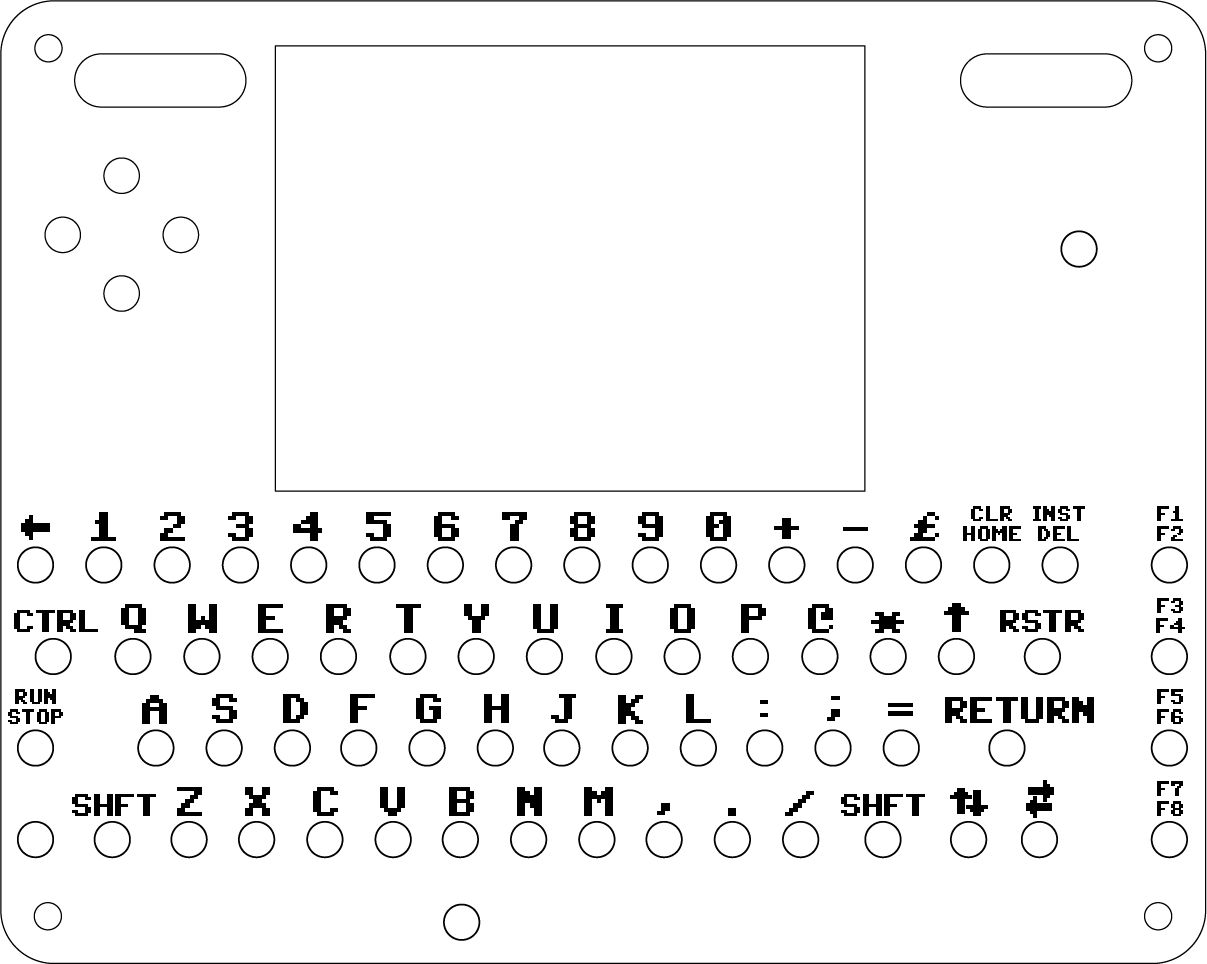
<style>
.page{position:relative;width:1207px;height:964px;background:#ffffff}
.page>*{position:absolute;margin:0}
.t1{font:16.7px "C64Pro";color:#000000}
.t2{font:33.3px "C64Pro";color:#000000}
.t3{font:25px "C64Pro";color:#000000}
.t4{font:29.2px "C64Pro";color:#000000}
</style>
<div class="page">
<p class="t1" style="left:963px;top:506px;width:58px;height:35px;text-align:center">CLR<br>HOME</p>
<p class="t1" style="left:1033px;top:506px;width:52px;height:35px;text-align:center">INST<br>DEL</p>
<p class="t1" style="left:1157px;top:506px;width:26px;height:35px;text-align:center">F1<br>F2</p>
<p class="t2" style="left:21px;top:515px;width:29px;height:25px;rotate:-90deg">↑</p>
<p class="t2" style="left:91px;top:512px;width:25px;height:29px">1</p>
<p class="t2" style="left:160px;top:512px;width:25px;height:29px">2</p>
<p class="t2" style="left:228px;top:512px;width:25px;height:29px">3</p>
<p class="t2" style="left:293px;top:512px;width:29px;height:29px">4</p>
<p class="t2" style="left:366px;top:512px;width:25px;height:29px">5</p>
<p class="t2" style="left:434px;top:512px;width:25px;height:29px">6</p>
<p class="t2" style="left:502px;top:512px;width:25px;height:29px">7</p>
<p class="t2" style="left:570px;top:512px;width:25px;height:29px">8</p>
<p class="t2" style="left:638px;top:512px;width:25px;height:29px">9</p>
<p class="t2" style="left:706px;top:512px;width:25px;height:29px">0</p>
<p class="t2" style="left:774px;top:518px;width:25px;height:21px">+</p>
<p class="t2" style="left:910px;top:512px;width:29px;height:29px">£</p>
<p class="t2" style="left:121px;top:604px;width:25px;height:29px">Q</p>
<p class="t2" style="left:188px;top:604px;width:29px;height:29px">W</p>
<p class="t2" style="left:258px;top:604px;width:25px;height:29px">E</p>
<p class="t2" style="left:326px;top:604px;width:25px;height:29px">R</p>
<p class="t2" style="left:396px;top:604px;width:25px;height:29px">T</p>
<p class="t2" style="left:464px;top:604px;width:25px;height:29px">Y</p>
<p class="t2" style="left:533px;top:604px;width:25px;height:29px">U</p>
<p class="t2" style="left:606px;top:604px;width:17px;height:29px">I</p>
<p class="t2" style="left:670px;top:604px;width:25px;height:29px">O</p>
<p class="t2" style="left:741px;top:604px;width:25px;height:29px">P</p>
<p class="t2" style="left:808px;top:604px;width:25px;height:29px">@</p>
<p class="t2" style="left:944px;top:603px;width:25px;height:29px">↑</p>
<p class="t1" style="left:1156px;top:598px;width:29px;height:35px;text-align:center">F3<br>F4</p>
<p class="t3" style="left:14px;top:610px;width:84px;height:22px">CTRL</p>
<p class="t2" style="left:871px;top:612px;width:33px;height:21px">*</p>
<p class="t3" style="left:1000px;top:610px;width:84px;height:22px">RSTR</p>
<p class="t1" style="left:8px;top:689px;width:55px;height:35px;text-align:center">RUN<br>STOP</p>
<p class="t1" style="left:1157px;top:689px;width:26px;height:35px;text-align:center">F5<br>F6</p>
<p class="t2" style="left:142px;top:695px;width:25px;height:29px">A</p>
<p class="t2" style="left:212px;top:694px;width:25px;height:29px">S</p>
<p class="t2" style="left:283px;top:694px;width:25px;height:29px">D</p>
<p class="t2" style="left:350px;top:694px;width:25px;height:29px">F</p>
<p class="t2" style="left:416px;top:694px;width:25px;height:29px">G</p>
<p class="t2" style="left:484px;top:694px;width:25px;height:29px">H</p>
<p class="t2" style="left:551px;top:694px;width:25px;height:29px">J</p>
<p class="t2" style="left:618px;top:695px;width:25px;height:29px">K</p>
<p class="t2" style="left:686px;top:694px;width:25px;height:29px">L</p>
<p class="t2" style="left:760px;top:700px;width:8px;height:17px">:</p>
<p class="t2" style="left:827px;top:696px;width:13px;height:25px">;</p>
<p class="t4" style="left:945px;top:697px;width:149px;height:26px">RETURN</p>
<p class="t2" style="left:888px;top:703px;width:25px;height:13px">=</p>
<p class="t4" style="left:1028px;top:780px;width:26px;height:22px;rotate:90deg">↑</p>
<p class="t1" style="left:1157px;top:781px;width:26px;height:35px;text-align:center">F7<br>F8</p>
<p class="t3" style="left:72px;top:794px;width:84px;height:22px">SHFT</p>
<p class="t2" style="left:177px;top:787px;width:25px;height:29px">Z</p>
<p class="t2" style="left:245px;top:787px;width:25px;height:29px">X</p>
<p class="t2" style="left:313px;top:787px;width:25px;height:29px">C</p>
<p class="t2" style="left:380px;top:787px;width:25px;height:29px">V</p>
<p class="t2" style="left:449px;top:787px;width:25px;height:29px">B</p>
<p class="t2" style="left:517px;top:787px;width:25px;height:29px">N</p>
<p class="t2" style="left:584px;top:787px;width:29px;height:29px">M</p>
<p class="t2" style="left:785px;top:791px;width:29px;height:25px">/</p>
<p class="t3" style="left:841px;top:794px;width:84px;height:22px">SHFT</p>
<p class="t4" style="left:950px;top:788px;width:22px;height:26px">↑</p>
<p class="t4" style="left:966px;top:790px;width:22px;height:26px;rotate:180deg">↑</p>
<p class="t4" style="left:1026px;top:796px;width:26px;height:22px;rotate:-90deg">↑</p>
<p class="t2" style="left:657px;top:803px;width:13px;height:12px">,</p>
</div>
